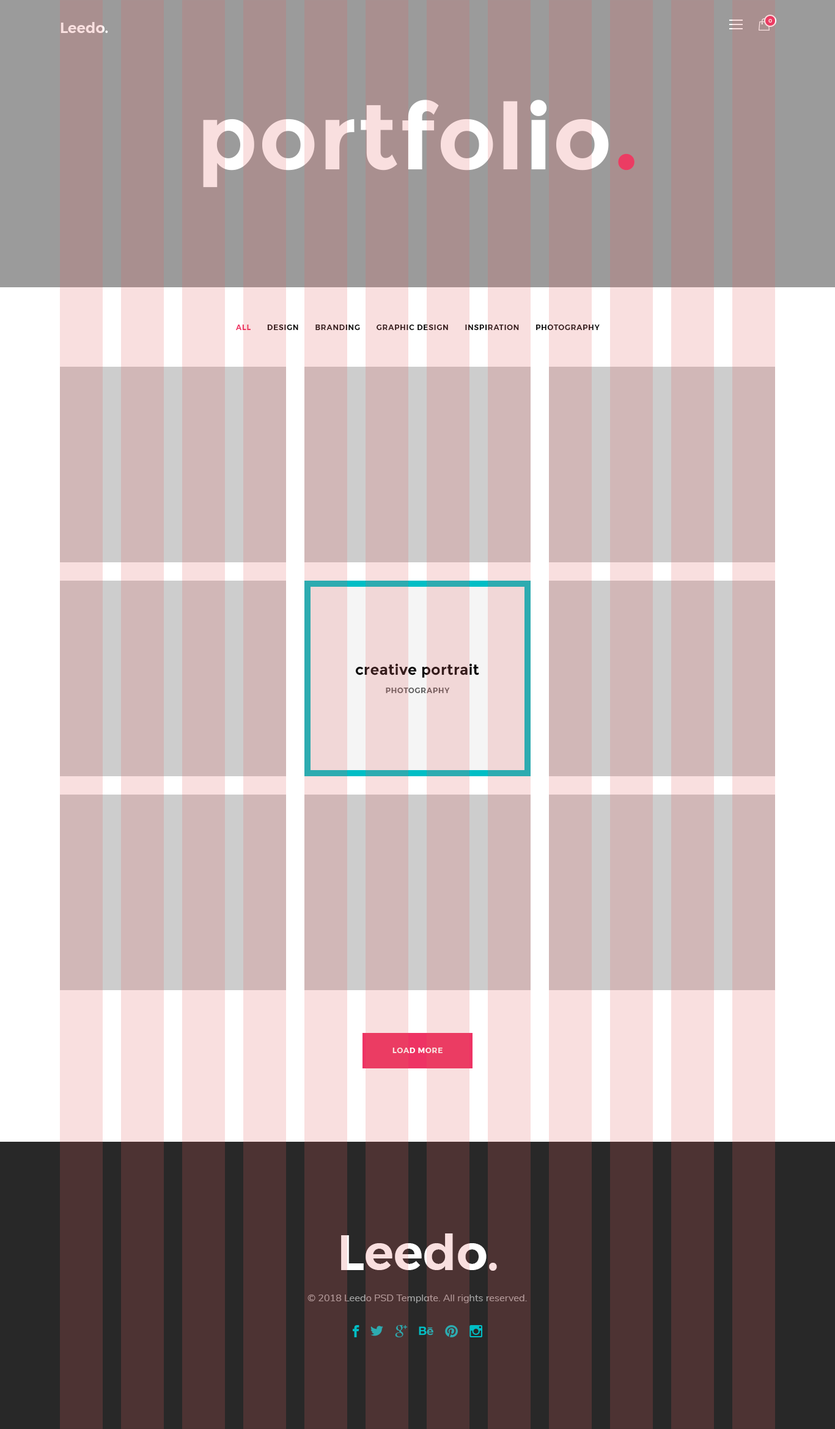
<style>
.page{position:relative;width:835px;height:1429px}
.page>*{position:absolute;margin:0}
.t1{font:14.7px "Montserrat-SemiBold";color:#f9dfdf}
.t2{font:4.9px "Montserrat-Medium";letter-spacing:0.05em;color:#f9dfdf;text-transform:uppercase}
.t3{font:91.7px "Montserrat-Bold";letter-spacing:0.01em}
.t4{font:7.3px "Montserrat-SemiBold";letter-spacing:0.075em;text-transform:uppercase}
.t5{font:14.7px "Montserrat-Bold";letter-spacing:0.01em}
.t6{font:7.3px "Montserrat-SemiBold";letter-spacing:0.075em;color:#765c5c;text-transform:uppercase}
.t7{font:48.9px "Montserrat-SemiBold";color:#f9dfdf}
.t8{font:9.8px "Muli-Regular";color:#a7a7a7}
</style>
<div class="page">
<p class="t1" style="left:60px;top:22px;width:48px;height:11px">Leedo.</p>
<p class="t2" style="left:768px;top:19px;width:4px;height:4px">0</p>
<p class="t3" style="left:203px;top:100px;width:431px;height:88px">portfolio.</p>
<p class="t4" style="left:236px;top:324px;width:363px;height:6px">all       design       branding       graphic design       inspiration       photography</p>
<p class="t5" style="left:356px;top:663px;width:123px;height:15px">creative portrait</p>
<p class="t6" style="left:386px;top:687px;width:64px;height:6px">photography</p>
<p class="t4" style="left:392px;top:1047px;width:50px;height:6px">load more</p>
<p class="t7" style="left:341px;top:1233px;width:156px;height:37px">Leedo.</p>
<p class="t8" style="left:307px;top:1294px;width:220px;height:9px">© 2018 Leedo PSD Template. All rights reserved.</p>
</div>
